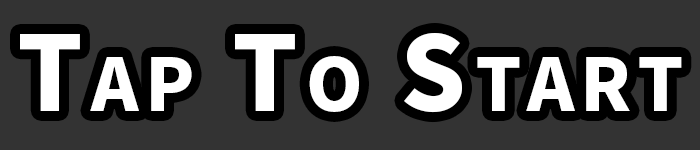
<style>
.page{position:relative;width:700px;height:150px;background:#333333}
.page>*{position:absolute;margin:0}
.t1{font:103.1px "NotoSansCJKjp-Black";letter-spacing:0.08em;color:#ffffff;font-variant:small-caps}
</style>
<div class="page">
<p class="t1" style="left:20px;top:33px;width:662px;height:80px">Tap To Start</p>
</div>
